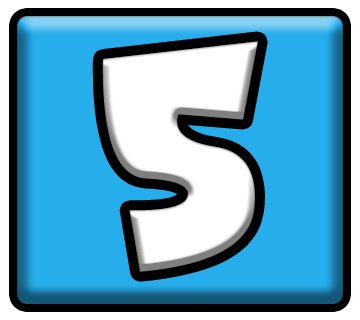
<style>
.page{position:relative;width:360px;height:320px;background:#26adec}
.page>*{position:absolute;margin:0}
.t1{font:277.8px "Funhouse";color:#ffffff;scale:0.91 1}
</style>
<div class="page">
<p class="t1" style="left:102px;top:41px;width:156px;height:231px">5</p>
</div>
